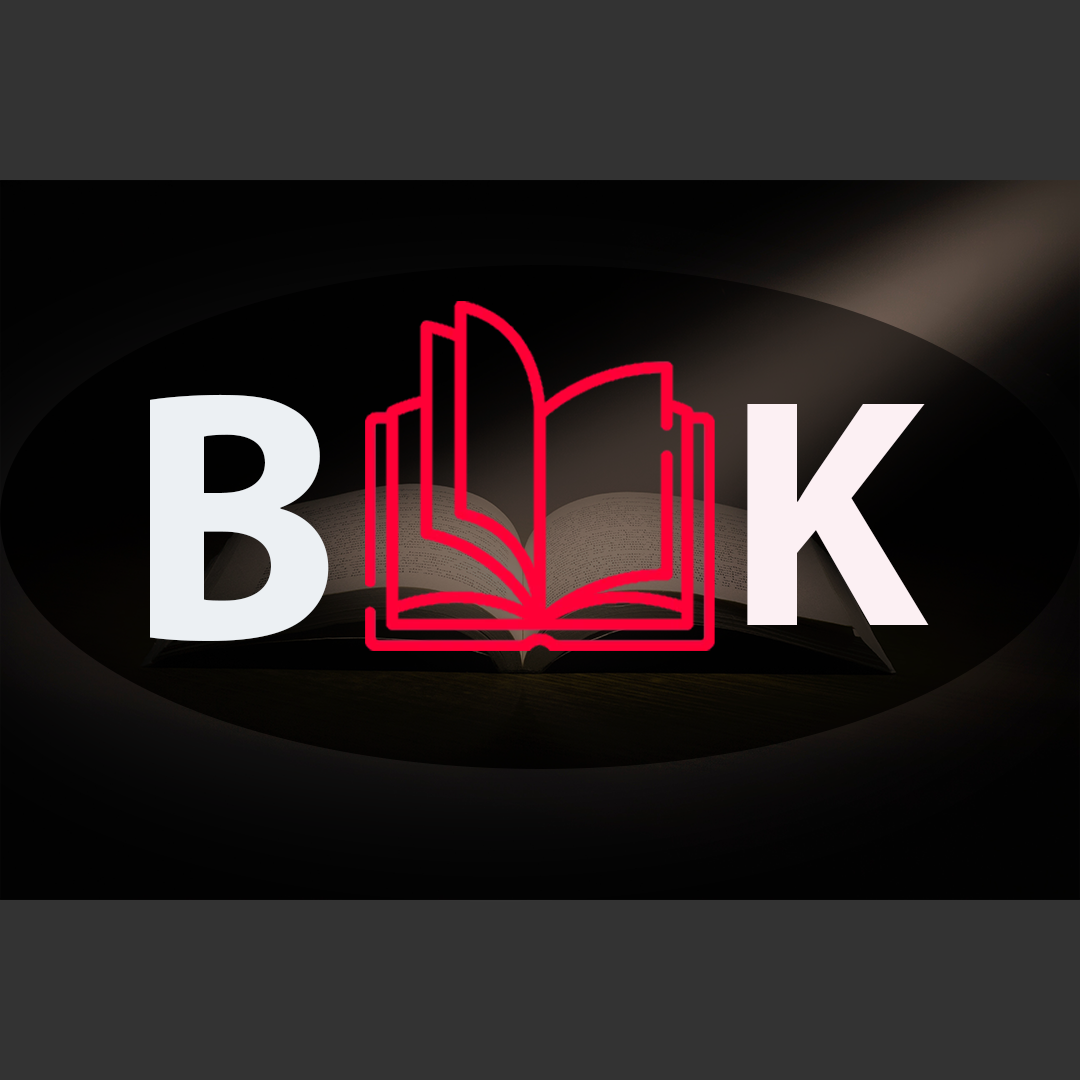
<style>
.page{position:relative;width:1080px;height:1080px;background:#333333}
.page>*{position:absolute;margin:0}
.t1{font:500px "MyriadArabic-Bold";color:#ecf0f3}
.t2{font:458.3px "MyriadArabic-Bold";color:#fcf0f3}
</style>
<div class="page">
<p class="t1" style="left:150px;top:394px;width:179px;height:247px">B</p>
<p class="t2" style="left:747px;top:404px;width:182px;height:221px">K</p>
</div>
